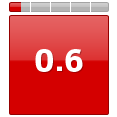
<style>
.page{position:relative;width:117px;height:117px;background:#d40000}
.page>*{position:absolute;margin:0}
.t1{font:36px "Colaborate-Bold";color:#ffffff;text-transform:uppercase}
</style>
<div class="page">
<p class="t1" style="left:35px;top:49px;width:48px;height:23px">0.6</p>
</div>
